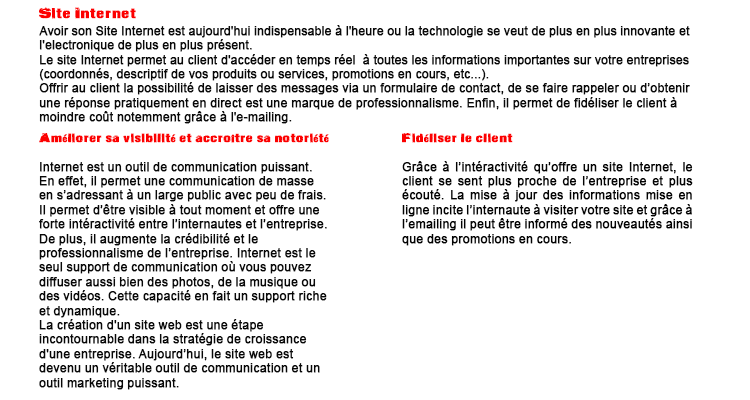
<style>
.page{position:relative;width:750px;height:400px;background:#ffffff}
.page>*{position:absolute;margin:0}
.t1{font:14px "ActionoftheTimeNew";color:#fc0000;font-weight:bold}
.t2{font:12px "ArialMT";color:#080808;font-weight:bold}
.t3{font:12px "ActionoftheTimeNew";color:#fc0000;font-weight:bold}
.t4{font:12px "ArialMT";color:#030303;font-weight:bold}
</style>
<div class="page">
<p class="t1" style="left:39px;top:7px;width:97px;height:12px">Site Internet</p>
<p class="t2" style="left:39px;top:25px;width:651px;height:99px">Avoir son Site Internet est aujourd'hui indispensable à l'heure ou la technologie se veut de plus en plus innovante et l'electronique de plus en plus présent. <br>Le site Internet permet au client d'accéder en temps réel  à toutes les informations importantes sur votre entreprises (coordonnés, descriptif de vos produits ou services, promotions en cours, etc...).<br>Offrir au client la possibilité de laisser des messages via un formulaire de contact, de se faire rappeler ou d’obtenir une réponse pratiquement en direct est une marque de professionnalisme. Enfin, il permet de fidéliser le client à moindre coût notemment grâce à l'e-mailing.</p>
<p class="t2" style="left:39px;top:133px;width:290px;height:257px;text-align:justify"><span class="t3">Améliorer sa visibilité et accroître sa notoriété<br></span><br>Internet est un outil de communication puissant. En effet, il permet une communication de masse en s’adressant à un large public avec peu de frais. Il permet d’être visible à tout moment et offre une forte intéractivité entre l’internautes et l’entreprise.<br>De plus, il augmente la crédibilité et le professionnalisme de l’entreprise. Internet est le seul support de communication où vous pouvez diffuser aussi bien des photos, de la musique ou des vidéos. Cette capacité en fait un support riche et dynamique.<br>La création d'un site web est une étape incontournable dans la stratégie de croissance d'une entreprise. Aujourd’hui, le site web est devenu un véritable outil de communication et un outil marketing puissant.</p>
<p class="t4" style="left:402px;top:133px;width:291px;height:113px;text-align:justify"><span class="t3">Fidéliser le client<br><br></span>Grâce à l’intéractivité qu’offre un site Internet, le client se sent plus proche de l’entreprise et plus écouté. La mise à jour des informations mise en ligne incite l’internaute à visiter votre site et grâce à l’emailing il peut être informé des nouveautés ainsi que des promotions en cours.</p>
</div>
